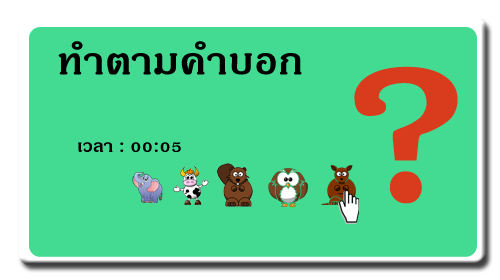
<style>
.page{position:relative;width:500px;height:280px;background:#43db92}
.page>*{position:absolute;margin:0}
.t1{font:53.1px "JasmineUPCBold";color:#000000}
.t2{font:316.8px "JasmineUPCBold";color:#d93c1d}
.t3{font:24px "JasmineUPCBold";color:#000000}
</style>
<div class="page">
<p class="t1" style="left:58px;top:41px;width:244px;height:34px">ทำตามคำบอก</p>
<p class="t2" style="left:354px;top:66px;width:104px;height:138px">?</p>
<p class="t3" style="left:78px;top:142px;width:103px;height:10px">เวลา : 00:05</p>
</div>
